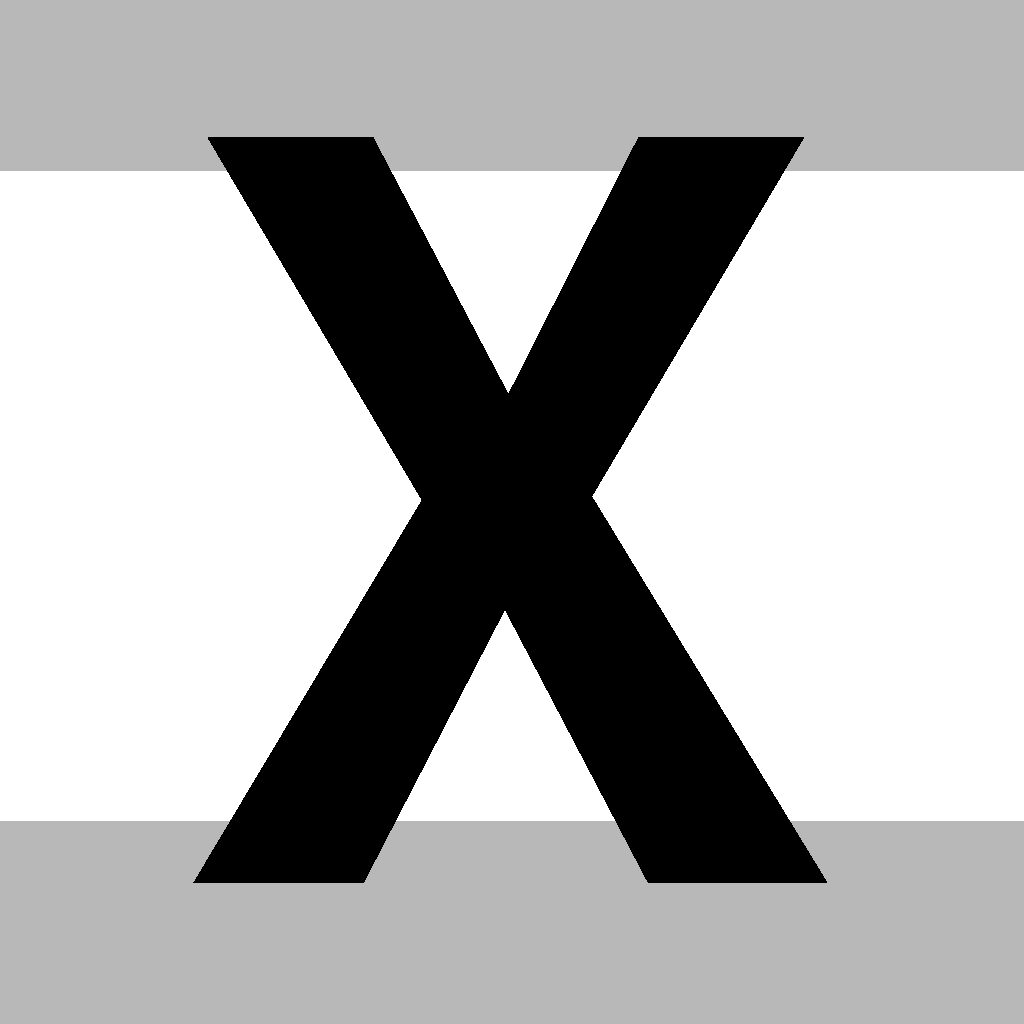
<style>
.page{position:relative;width:1024px;height:1024px;background:#ffffff}
.page>*{position:absolute;margin:0}
.t1{font:1166.7px "Consolas-Bold";color:#000000}
</style>
<div class="page">
<p class="t1" style="left:193px;top:137px;width:634px;height:746px">X</p>
</div>
